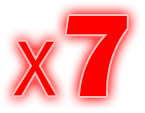
<style>
.page{position:relative;width:145px;height:113px;background:#ffffff}
.page>*{position:absolute;margin:0}
.t1{font:100px "HGGothicM";color:#fe0000}
.t2{font:120px "BritannicBold";color:#fe0000}
</style>
<div class="page">
<p class="t1" style="left:13px;top:16px;width:114px;height:80px">x<span class="t2">7</span></p>
</div>
